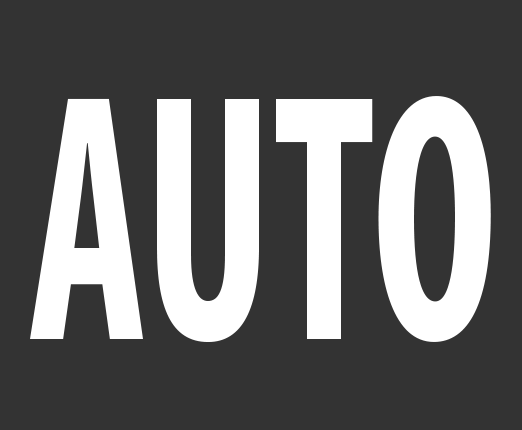
<style>
.page{position:relative;width:522px;height:430px;background:#333333}
.page>*{position:absolute;margin:0}
.t1{font:356px "MyriadPro-BoldCond";color:#ffffff;scale:0.73 1}
</style>
<div class="page">
<p class="t1" style="left:30px;top:96px;width:461px;height:247px">AUTO</p>
</div>
